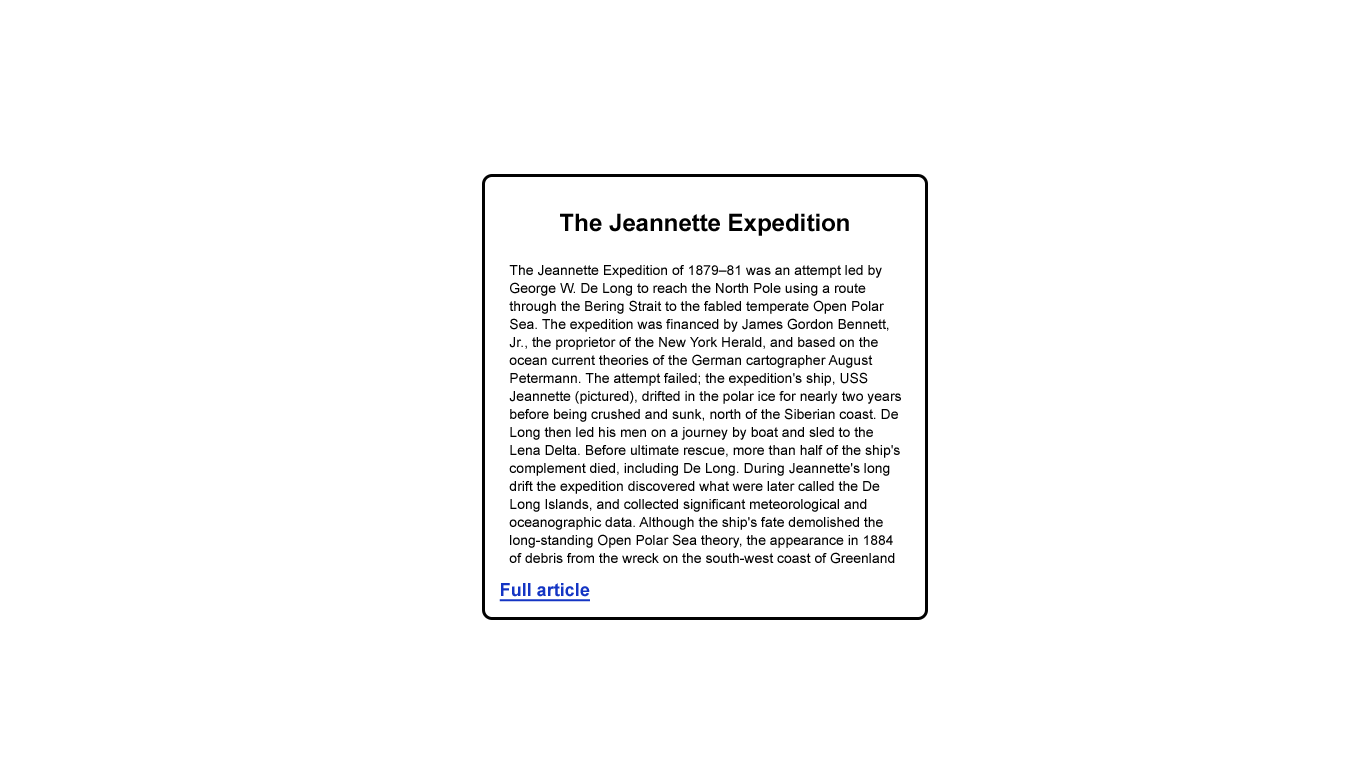
<style>
.page{position:relative;width:1366px;height:768px;background:#ffffff}
.page>*{position:absolute;margin:0}
.t1{font:24px "Arial-BoldMT";color:#000000}
.t2{font:14px/18px "ArialMT";color:#000000}
.t3{font:18px "Arial-BoldMT";color:#1435c4;text-decoration:underline}
</style>
<div class="page">
<p class="t1" style="left:560px;top:213px;width:289px;height:23px">The Jeannette Expedition</p>
<p class="t2" style="left:509px;top:265px;width:392px;height:299px">The Jeannette Expedition of 1879–81 was an attempt led by George W. De Long to reach the North Pole using a route through the Bering Strait to the fabled temperate Open Polar Sea. The expedition was financed by James Gordon Bennett, Jr., the proprietor of the New York Herald, and based on the ocean current theories of the German cartographer August Petermann. The attempt failed; the expedition's ship, USS Jeannette (pictured), drifted in the polar ice for nearly two years before being crushed and sunk, north of the Siberian coast. De Long then led his men on a journey by boat and sled to the Lena Delta. Before ultimate rescue, more than half of the ship's complement died, including De Long. During Jeannette's long drift the expedition discovered what were later called the De Long Islands, and collected significant meteorological and oceanographic data. Although the ship's fate demolished the long-standing Open Polar Sea theory, the appearance in 1884 of debris from the wreck on the south-west coast of Greenland indicated that an Arctic current carried the ice from east to west. This discovery inspired Fridtjof Nansen to mount his Fram expedition nine years later.</p>
<p class="t3" style="left:499px;top:583px;width:91px;height:19px">Full article</p>
</div>
